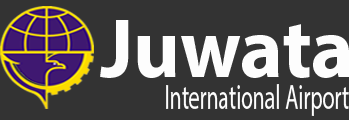
<style>
.page{position:relative;width:349px;height:120px;background:#333333}
.page>*{position:absolute;margin:0}
.t1{font:63.5px "MyriadPro-Bold";color:#fdfdfd;scale:0.95 1}
.t2{font:26.4px "MyriadPro-Regular";color:#fdfdfd;scale:0.61 1}
</style>
<div class="page">
<p class="t1" style="left:100px;top:20px;width:250px;height:58px">Juwata</p>
<p class="t2" style="left:166px;top:84px;width:183px;height:32px">International Airport</p>
</div>
